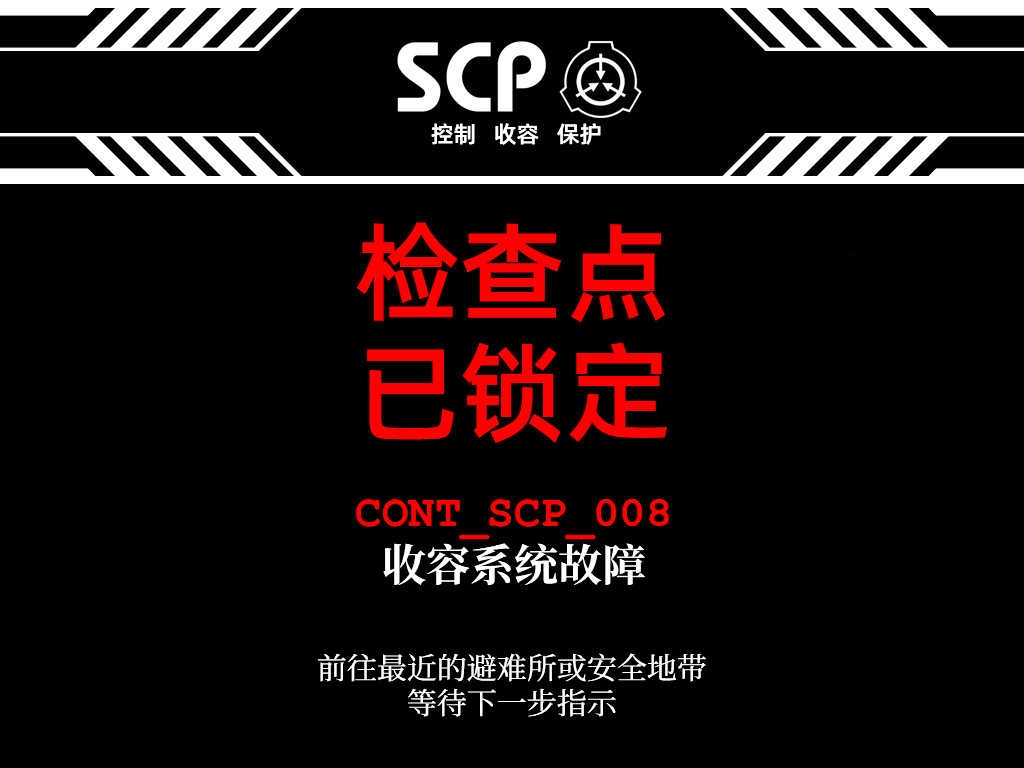
<style>
.page{position:relative;width:1024px;height:768px;background:#000000}
.page>*{position:absolute;margin:0}
.t1{font:23px "AlibabaPuHuiTiM";color:#ffffff}
.t2{font:107px/120px "AlibabaPuHuiTiM";color:#ff0000}
.t3{font:44px/55px "ContainmentBreach-Bold";color:#ff0000}
.t4{font:44px/55px "CourierNewPS-BoldMT";color:#ff0000}
.t5{font:44px/55px "ContainmentBreach-Bold";color:#ffffff}
.t6{font:30px/35px "ContainmentBreach-Regular";color:#ffffff}
</style>
<div class="page">
<p class="t1" style="left:431px;top:123px;width:170px;height:22px">控制   收容   保护</p>
<p class="t2" style="left:356px;top:222px;width:311px;height:221px">检查点<br>已锁定</p>
<p class="t3" style="left:356px;top:499px;width:313px;height:87px;text-align:center">CONT_SCP_<span class="t4">008<br></span><span class="t5">收容系统故障</span></p>
<p class="t6" style="left:317px;top:653px;width:389px;height:64px;text-align:center">前往最近的避难所或安全地带<br>等待下一步指示</p>
</div>
